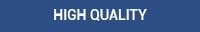
<style>
.page{position:relative;width:200px;height:32px;background:#2c4e85}
.page>*{position:absolute;margin:0}
.t1{font:14px "Roboto-Medium";color:#ffffff}
</style>
<div class="page">
<p class="t1" style="left:54px;top:9px;width:93px;height:12px">HIGH QUALITY</p>
</div>
